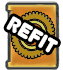
<style>
.page{position:relative;width:63px;height:70px;background:#ffffff}
.page>*{position:absolute;margin:0}
.t1{font:24px "Junegull";color:#ffffff}
</style>
<div class="page">
<p class="t1" style="left:6px;top:16px;width:52px;height:37px;rotate:30deg">REFIT</p>
</div>
